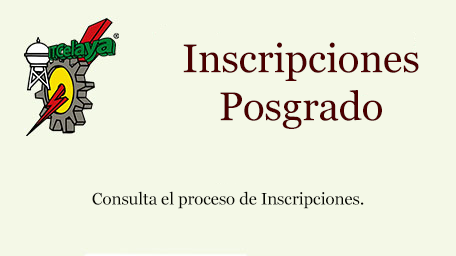
<style>
.page{position:relative;width:456px;height:256px;background:#f4f8e7}
.page>*{position:absolute;margin:0}
.t1{font:40px "Georgia";color:#4a0000}
.t2{font:16.7px "Georgia";color:#050600}
</style>
<div class="page">
<p class="t1" style="left:183px;top:42px;width:236px;height:87px;text-align:center">Inscripciones <br>Posgrado</p>
<p class="t2" style="left:92px;top:191px;width:272px;height:18px">Consulta el proceso de Inscripciones.</p>
</div>
